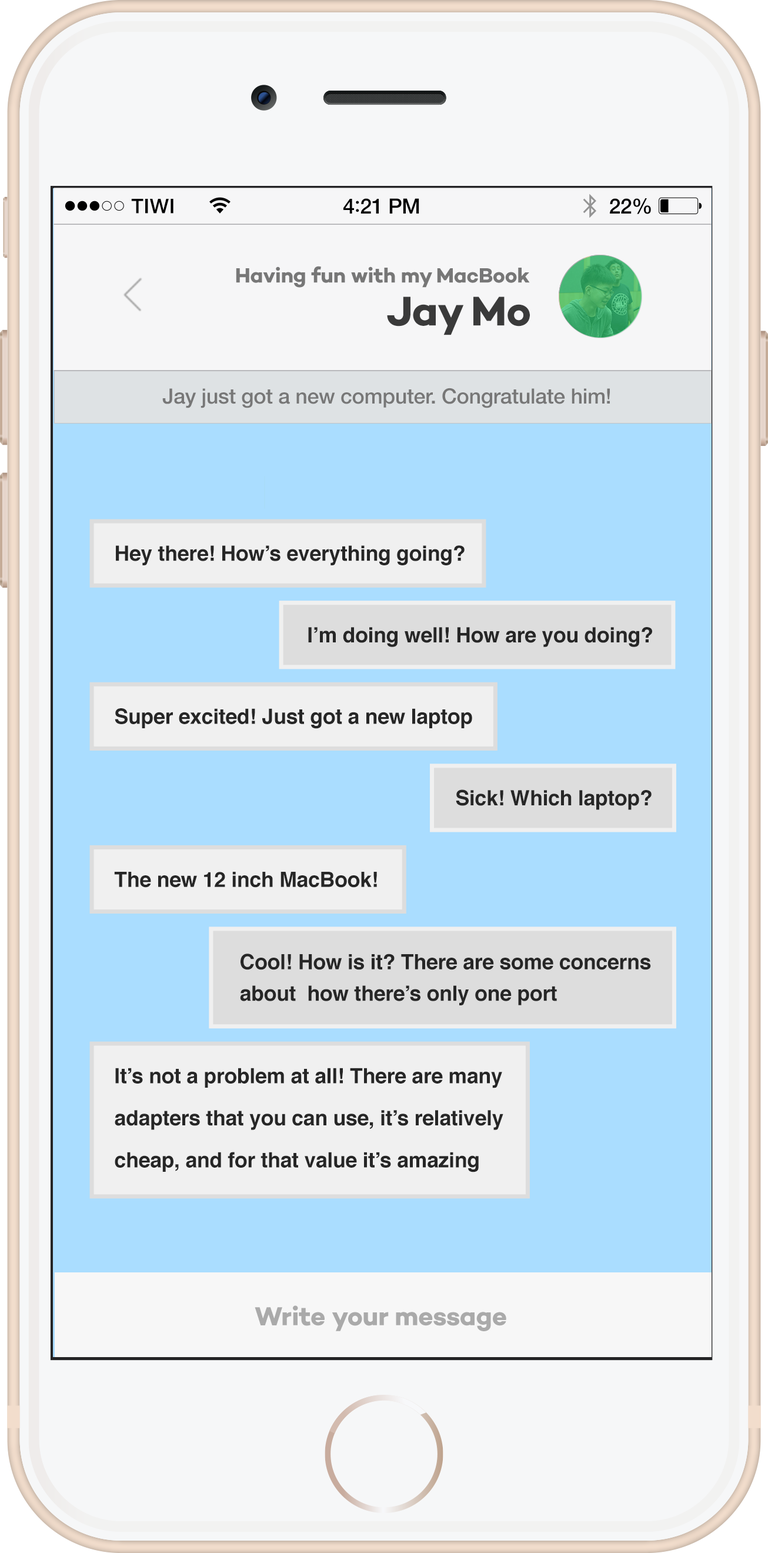
<style>
.page{position:relative;width:768px;height:1553px;background:#aaddff}
.page>*{position:absolute;margin:0}
.t1{font:20.2px "HelveticaNeue-Medium";letter-spacing:0.02em;color:#000000}
.t2{font:21px "HelveticaNeue-Medium";letter-spacing:-0.02em;color:#000000}
.t3{font:22.8px "Avenir-Medium";letter-spacing:-0.02em;color:#000000}
.t4{font:21px "Campton-BoldDEMO";letter-spacing:-0.01em;color:#777777}
.t5{font:42.1px "Campton-BoldDEMO";letter-spacing:-0.01em;color:#3a3a3a}
.t6{font:21px "HelveticaNeue-Medium";letter-spacing:-0.01em;color:#777777}
.t7{font:21px "Helvetica-Bold";letter-spacing:-0.01em;color:#262626}
.t8{font:21px/31.5px "Helvetica-Bold";letter-spacing:-0.01em;color:#262626}
.t9{font:21px/42.1px "Helvetica-Bold";letter-spacing:-0.01em;color:#262626}
.t10{font:26.3px "Campton-BoldDEMO";letter-spacing:-0.01em;color:#aaaaaa}
</style>
<div class="page">
<p class="t1" style="left:131px;top:199px;width:42px;height:14px">TIWI</p>
<p class="t2" style="left:343px;top:198px;width:76px;height:15px">4<span class="t3">:</span>21 PM</p>
<p class="t2" style="left:610px;top:198px;width:41px;height:16px">22%</p>
<p class="t4" style="left:236px;top:266px;width:294px;height:22px">Having fun with my MacBook</p>
<p class="t5" style="left:387px;top:296px;width:143px;height:39px">Jay Mo</p>
<p class="t6" style="left:162px;top:388px;width:448px;height:20px">Jay just got a new computer. Congratulate him!</p>
<p class="t7" style="left:116px;top:545px;width:349px;height:20px">Hey there! How’s everything going?</p>
<p class="t7" style="left:308px;top:627px;width:344px;height:20px">I’m doing well! How are you doing?</p>
<p class="t7" style="left:115px;top:708px;width:357px;height:21px">Super excited! Just got a new laptop</p>
<p class="t7" style="left:456px;top:789px;width:196px;height:21px">Sick! Which laptop?</p>
<p class="t7" style="left:114px;top:872px;width:263px;height:15px">The new 12 inch MacBook!</p>
<p class="t8" style="left:240px;top:953px;width:411px;height:52px">Cool! How is it? There are some concerns<br>about  how there’s only one port</p>
<p class="t9" style="left:115px;top:1067px;width:388px;height:105px">It’s not a problem at all! There are many<br>adapters that you can use, it’s relatively<br>cheap, and for that value it’s amazing</p>
<p class="t10" style="left:255px;top:1305px;width:251px;height:26px">Write your message</p>
</div>
